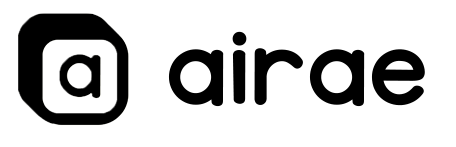
<style>
.page{position:relative;width:456px;height:147px;background:#ffffff}
.page>*{position:absolute;margin:0}
.t1{font:157.4px "KGPrimaryPenmanship";color:#000000}
</style>
<div class="page">
<p class="t1" style="left:168px;top:31px;width:257px;height:76px">airae</p>
</div>
